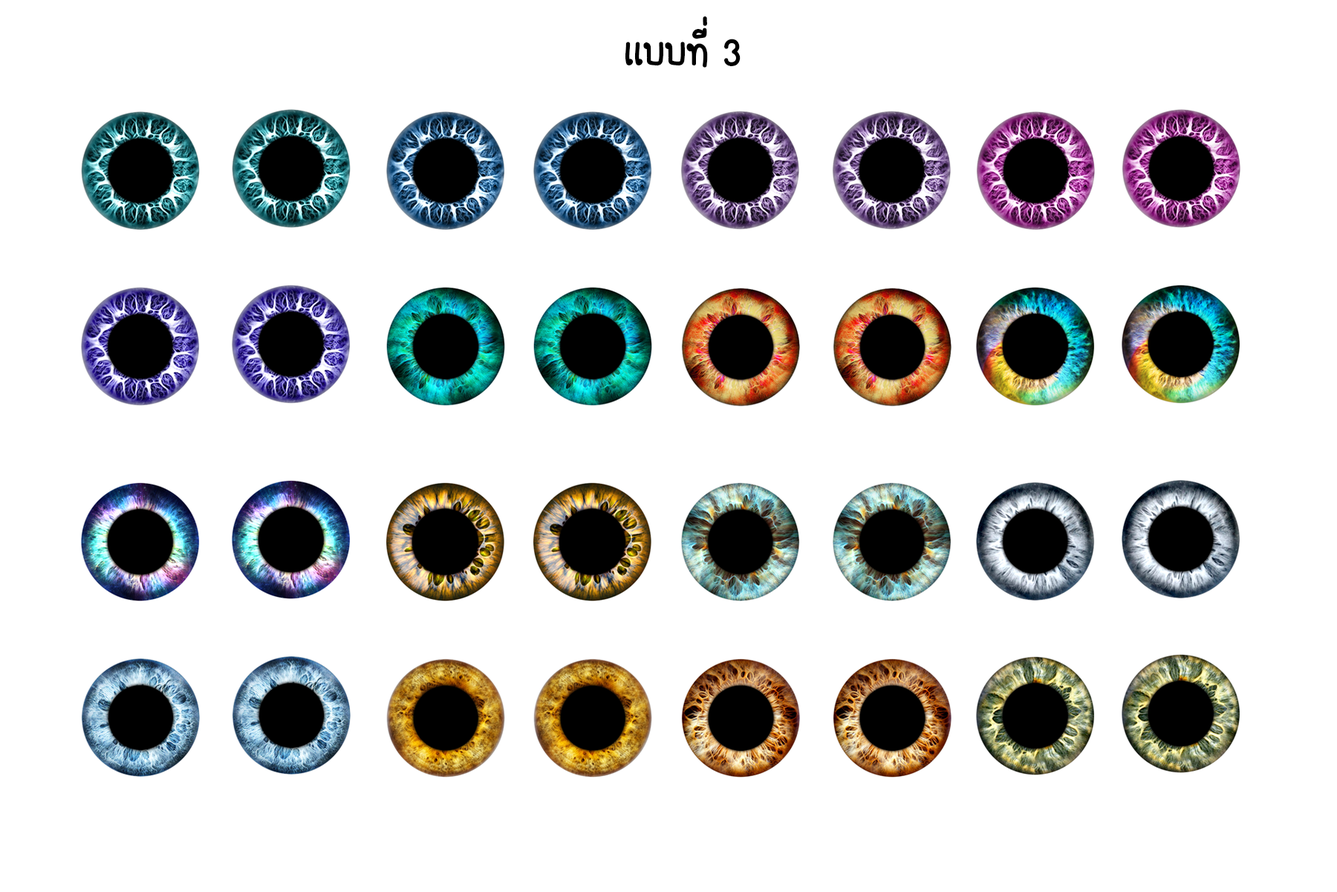
<style>
.page{position:relative;width:1337px;height:892px;background:#ffffff}
.page>*{position:absolute;margin:0}
.t1{font:55.7px "FCDaisyRegular";color:#000000}
</style>
<div class="page">
<p class="t1" style="left:625px;top:16px;width:116px;height:52px">เเบบที่ 3</p>
</div>
